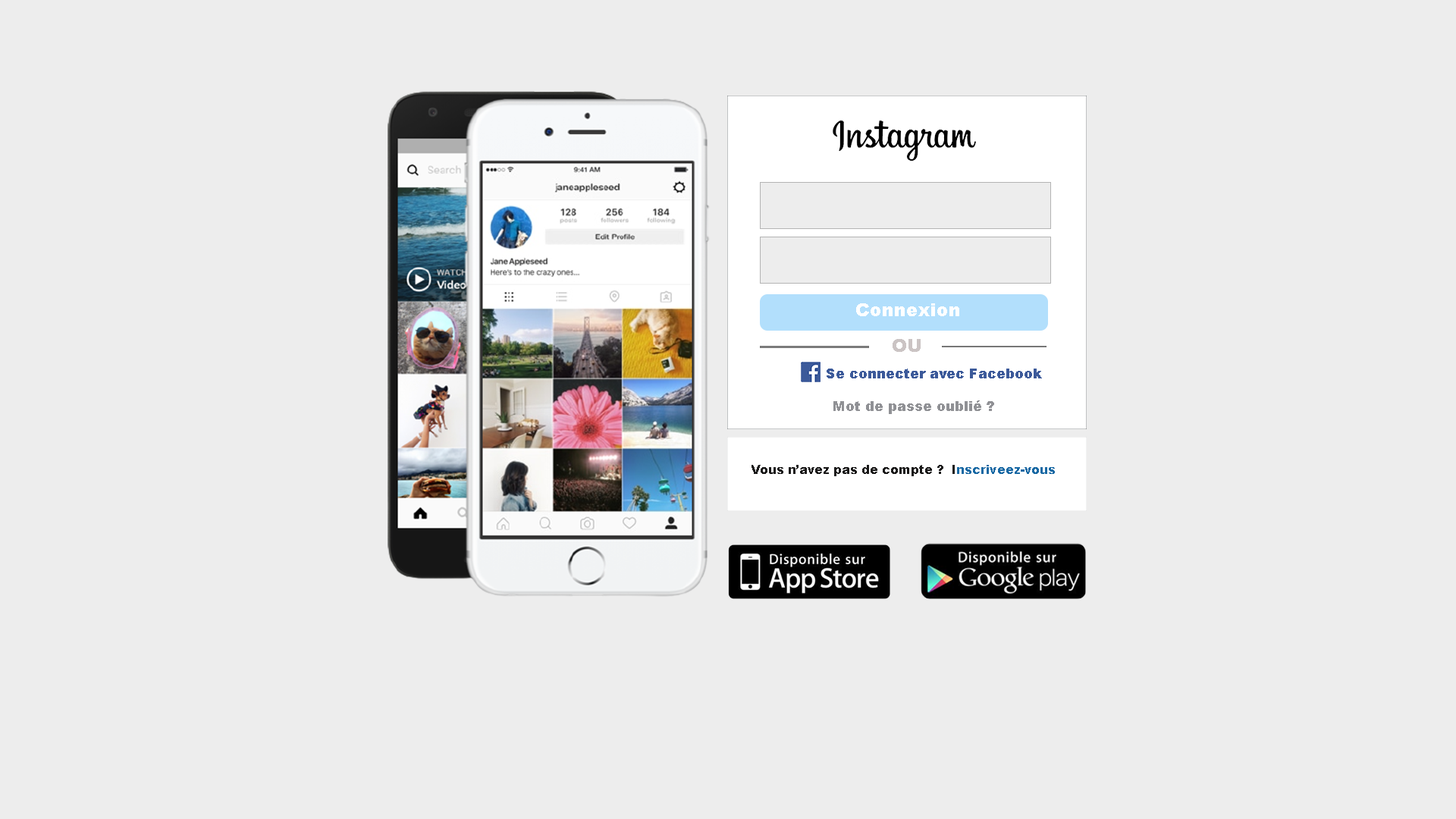
<style>
.page{position:relative;width:1456px;height:819px;background:#ededed}
.page>*{position:absolute;margin:0}
.t1{font:18.2px "Arial-Black";color:#ffffff}
.t2{font:18.2px "Arial-Black";color:#cbc4c4}
.t3{font:13.6px "Arial-Black";color:#3c5a9a}
.t4{font:13.6px "Arial-Black";color:#909195}
.t5{font:12.1px "Arial-Black";color:#1a1919}
.t6{font:12.1px "Arial-Black";color:#1969a4}
</style>
<div class="page">
<p class="t1" style="left:856px;top:303px;width:103px;height:13px">Connexion</p>
<p class="t2" style="left:893px;top:339px;width:28px;height:13px">OU</p>
<p class="t3" style="left:827px;top:369px;width:215px;height:9px">Se connecter avec Facebook</p>
<p class="t4" style="left:833px;top:400px;width:161px;height:14px">Mot de passe oublié ?</p>
<p class="t5" style="left:751px;top:465px;width:304px;height:11px">Vous n’avez pas de compte ?  I<span class="t6">nscriveez-vous</span></p>
</div>
